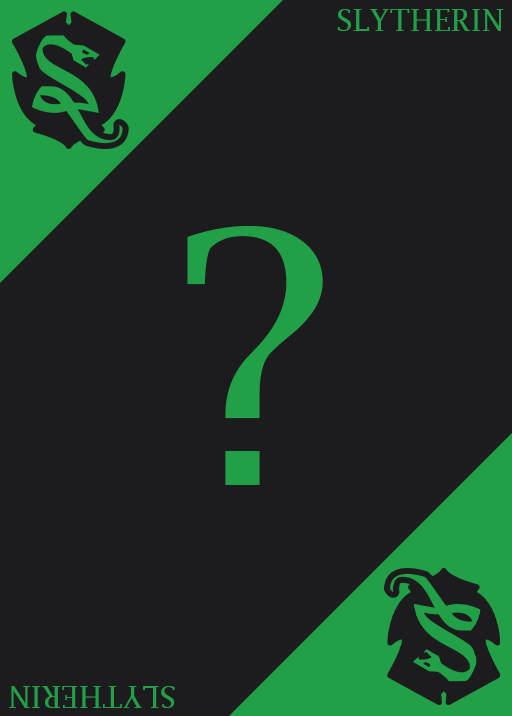
<style>
.page{position:relative;width:512px;height:716px;background:#1c1c1e}
.page>*{position:absolute;margin:0}
.t1{font:30px "LucidaFax";color:#22a047}
.t2{font:350px "LucidaBright";color:#22a047}
</style>
<div class="page">
<p class="t1" style="left:337px;top:9px;width:167px;height:22px">SLYTHERIN</p>
<p class="t2" style="left:187px;top:226px;width:136px;height:259px">?</p>
<p class="t1" style="left:9px;top:686px;width:166px;height:22px;rotate:180deg">SLYTHERIN</p>
</div>
